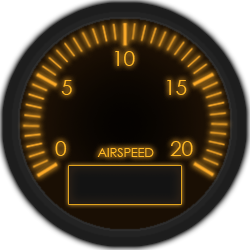
<style>
.page{position:relative;width:250px;height:250px}
.page>*{position:absolute;margin:0}
.t1{font:20.8px "CenturyGothic";color:#ffb924}
.t2{font:12.5px "CenturyGothic";color:#ffb924}
</style>
<div class="page">
<p class="t1" style="left:115px;top:51px;width:20px;height:15px">10</p>
<p class="t1" style="left:61px;top:80px;width:11px;height:15px">5</p>
<p class="t1" style="left:167px;top:80px;width:20px;height:15px">15</p>
<p class="t1" style="left:55px;top:141px;width:12px;height:15px">0</p>
<p class="t2" style="left:97px;top:148px;width:57px;height:9px">AIRSPEED</p>
<p class="t1" style="left:170px;top:141px;width:23px;height:15px">20</p>
</div>
